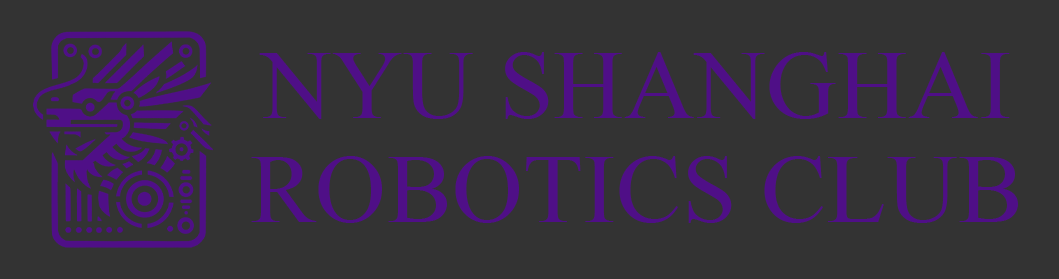
<style>
.page{position:relative;width:1059px;height:279px;background:#333333}
.page>*{position:absolute;margin:0}
.t1{font:98.2px/104.2px "TimesNewRomanPSMT";color:#4f0f87}
</style>
<div class="page">
<p class="t1" style="left:251px;top:52px;width:767px;height:171px;text-align:center">NYU SHANGHAI<br>ROBOTICS CLUB</p>
</div>
